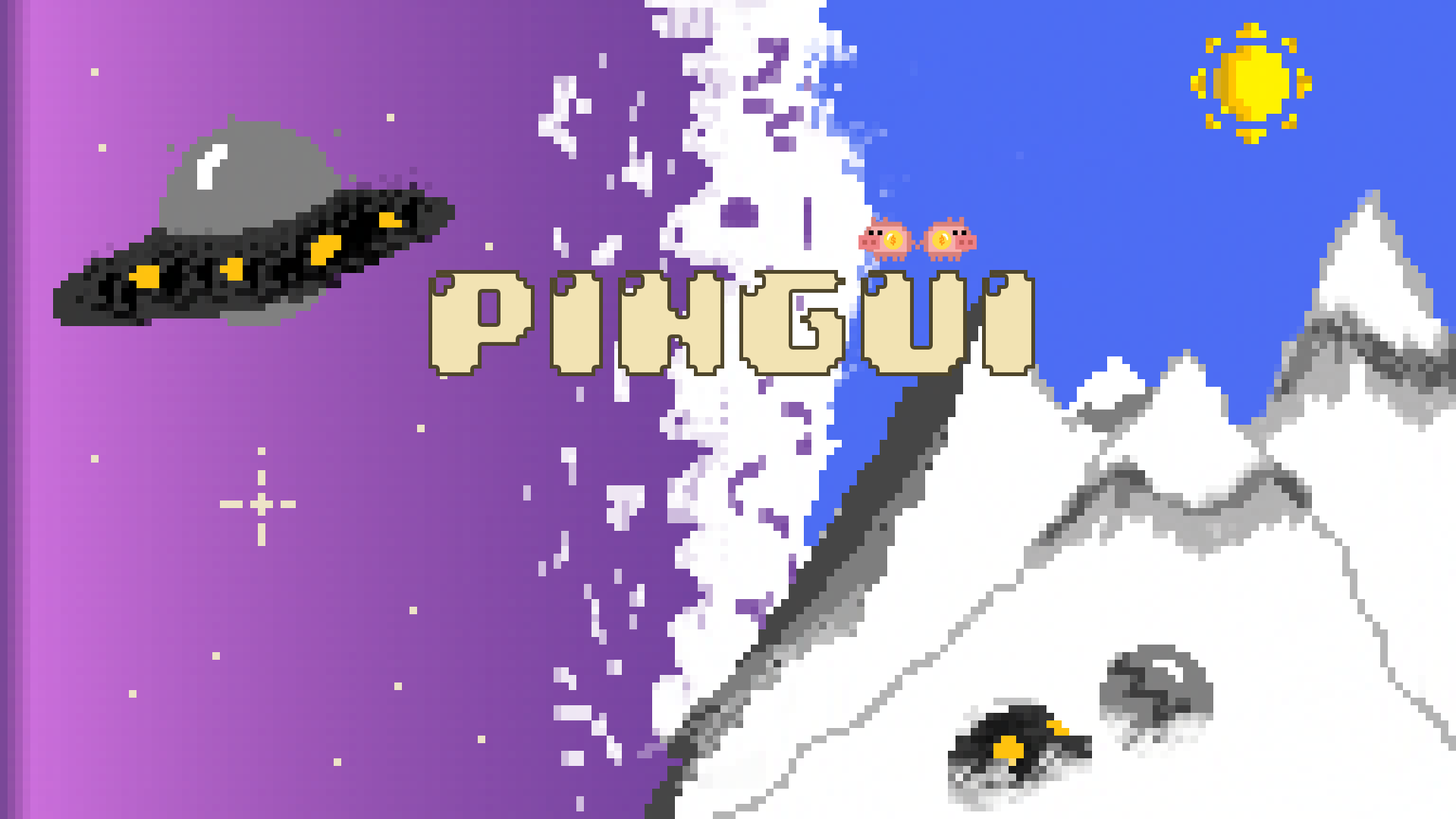
<style>
.page{position:relative;width:1456px;height:819px}
.page>*{position:absolute;margin:0}
.t1{font:128.9px "04b30";color:#f2e3b3}
</style>
<div class="page">
<p class="t1" style="left:428px;top:270px;width:607px;height:106px">PINGUI</p>
</div>
